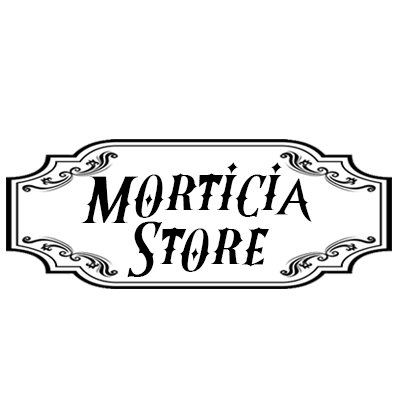
<style>
.page{position:relative;width:400px;height:400px;background:#ffffff}
.page>*{position:absolute;margin:0}
.t1{font:62.9px/54.7px "Wednesday";color:#000000;font-style:italic;scale:1.19 1}
</style>
<div class="page">
<p class="t1" style="left:81px;top:162px;width:231px;height:115px;text-align:justify">Morticia<br>Store</p>
</div>
